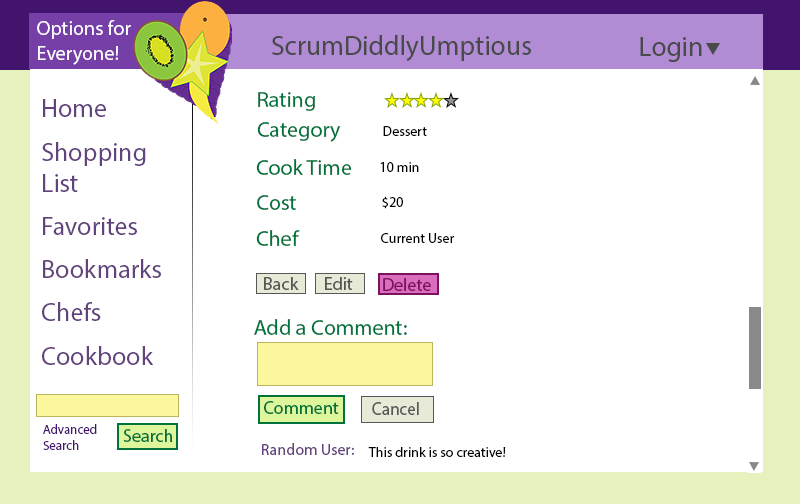
<style>
.page{position:relative;width:800px;height:504px;background:#ffffff}
.page>*{position:absolute;margin:0}
.t1{font:20.8px "MyriadPro-Regular";color:#fffefe;scale:0.97 1}
.t2{font:28.4px "MyriadPro-Regular";color:#474a48;scale:0.97 1}
.t3{font:26px "MyriadPro-Regular";color:#62437e}
.t4{font:10px "MyriadPro-Regular";color:#62437e}
.t5{font:22px "MyriadPro-Regular";color:#00733c}
.t6{font:14px "MyriadPro-Regular";color:#000000}
.t7{font:18px "MyriadPro-Regular";color:#565757}
.t8{font:18px "MyriadPro-Regular";color:#79145d}
.t9{font:18px "MyriadPro-Regular";color:#00733c}
.t10{font:18px "MyriadPro-Regular";color:#565757;scale:0.95 1}
.t11{font:13px "MyriadPro-Regular";color:#43146d}
.t12{font:16px "MyriadPro-Regular";color:#62437e}
</style>
<div class="page">
<p class="t1" style="left:37px;top:20px;width:94px;height:45px">Options for<br>Everyone!</p>
<p class="t2" style="left:272px;top:35px;width:259px;height:26px">ScrumDiddlyUmptious</p>
<p class="t2" style="left:640px;top:37px;width:62px;height:25px">Login</p>
<p class="t3" style="left:42px;top:99px;width:119px;height:266px">Home<br><span class="t4"><br></span>Shopping<br>List<br><br>Favorites<br><br>Bookmarks<br><br>Chefs<br><br>Cookbook</p>
<p class="t5" style="left:258px;top:92px;width:58px;height:19px">Rating</p>
<p class="t5" style="left:257px;top:122px;width:84px;height:20px">Category</p>
<p class="t6" style="left:383px;top:126px;width:44px;height:10px">Dessert</p>
<p class="t5" style="left:256px;top:159px;width:96px;height:16px">Cook Time</p>
<p class="t6" style="left:380px;top:162px;width:39px;height:10px">10 min</p>
<p class="t5" style="left:257px;top:195px;width:39px;height:15px">Cost</p>
<p class="t6" style="left:382px;top:196px;width:21px;height:13px">$20</p>
<p class="t5" style="left:256px;top:230px;width:44px;height:16px">Chef</p>
<p class="t6" style="left:381px;top:233px;width:74px;height:10px">Current User</p>
<p class="t7" style="left:264px;top:277px;width:35px;height:13px">Back</p>
<p class="t7" style="left:325px;top:277px;width:28px;height:13px">Edit</p>
<p class="t8" style="left:383px;top:278px;width:48px;height:13px">Delete</p>
<p class="t5" style="left:254px;top:319px;width:153px;height:16px">Add a Comment:</p>
<p class="t9" style="left:264px;top:401px;width:75px;height:13px">Comment</p>
<p class="t10" style="left:372px;top:402px;width:47px;height:13px">Cancel</p>
<p class="t11" style="left:43px;top:424px;width:54px;height:26px">Advanced<br>Search</p>
<p class="t9" style="left:123px;top:429px;width:49px;height:13px">Search</p>
<p class="t12" style="left:262px;top:443px;width:92px;height:12px">Random User:</p>
<p class="t6" style="left:368px;top:447px;width:138px;height:10px">This drink is so creative!</p>
</div>
